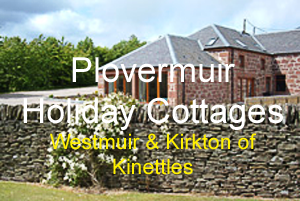
<style>
.page{position:relative;width:300px;height:201px}
.page>*{position:absolute;margin:0}
.t1{font:21.3px "ArialMT";color:#fff100}
.t2{font:34.5px "ArialMT";color:#ffffff}
</style>
<div class="page">
<p class="t1" style="left:23px;top:57px;width:260px;height:118px;text-align:center"><span class="t2">Plovermuir Holiday Cottages<br></span>Westmuir &amp; Kirkton of Kinettles</p>
</div>
